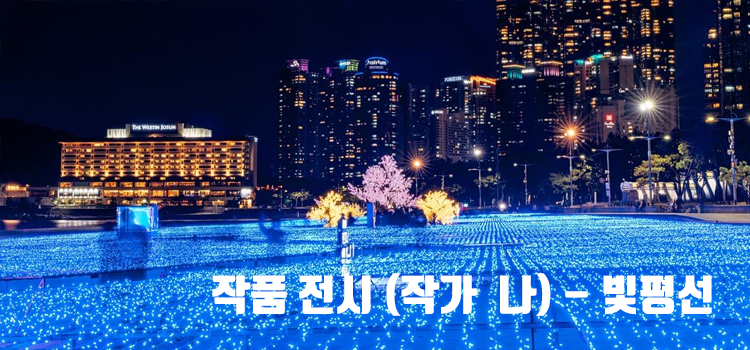
<style>
.page{position:relative;width:750px;height:350px}
.page>*{position:absolute;margin:0}
.t1{font:41.7px "TmonMonsoriBlack";color:#ffffff}
</style>
<div class="page">
<p class="t1" style="left:212px;top:273px;width:500px;height:43px">작품 전시 (작가  나) - 빛평선</p>
</div>
